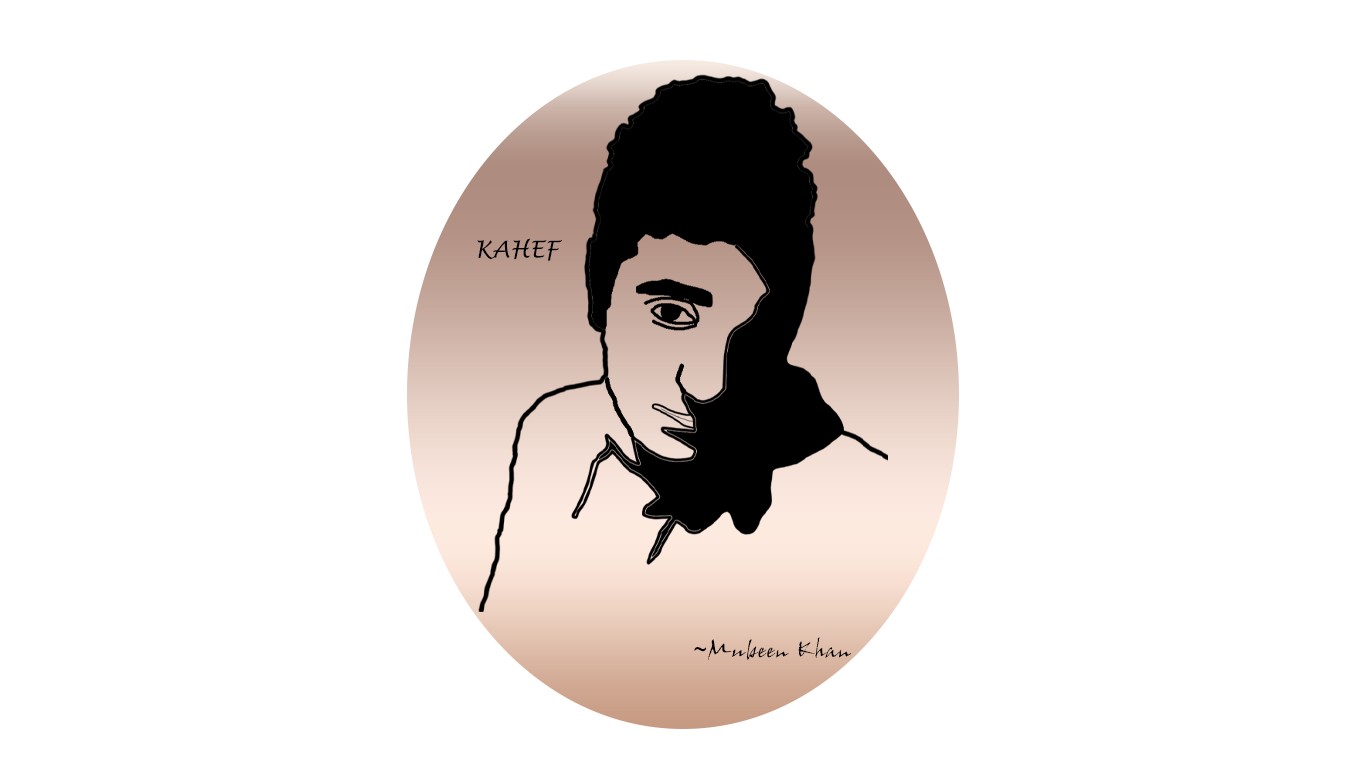
<style>
.page{position:relative;width:1366px;height:768px;background:#ffffff}
.page>*{position:absolute;margin:0}
.t1{font:23.2px "LucidaHandwriting-Italic";color:#000000}
.t2{font:23.2px "JohnHandyLetPlain";color:#000000}
.t3{font:23.2px "ArialMT";color:#000000}
</style>
<div class="page">
<p class="t1" style="left:477px;top:238px;width:86px;height:23px">KAHEF</p>
<p class="t2" style="left:694px;top:637px;width:158px;height:23px"><span class="t3">~</span>Mubeen Khan</p>
</div>
